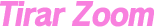
<style>
.page{position:relative;width:154px;height:28px;background:#ffffff}
.page>*{position:absolute;margin:0}
.t1{font:32px "RodinPro-EB";letter-spacing:-0.054em;color:#f880de;font-style:italic;scale:0.94 1}
</style>
<div class="page">
<p class="t1" style="left:0px;top:1px;width:155px;height:26px">Tirar Zoom</p>
</div>
